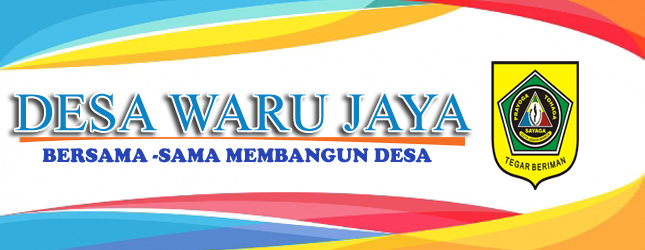
<style>
.page{position:relative;width:645px;height:250px;background:#ffffff}
.page>*{position:absolute;margin:0}
.t1{font:53.7px "TimesNewRomanPSMT";color:#0c83c5}
.t2{font:20.2px "CooperBlack";color:#2745b6}
</style>
<div class="page">
<p class="t1" style="left:15px;top:93px;width:457px;height:38px">DESA WARU JAYA</p>
<p class="t2" style="left:42px;top:148px;width:390px;height:15px">BERSAMA -SAMA MEMBANGUN DESA</p>
</div>
